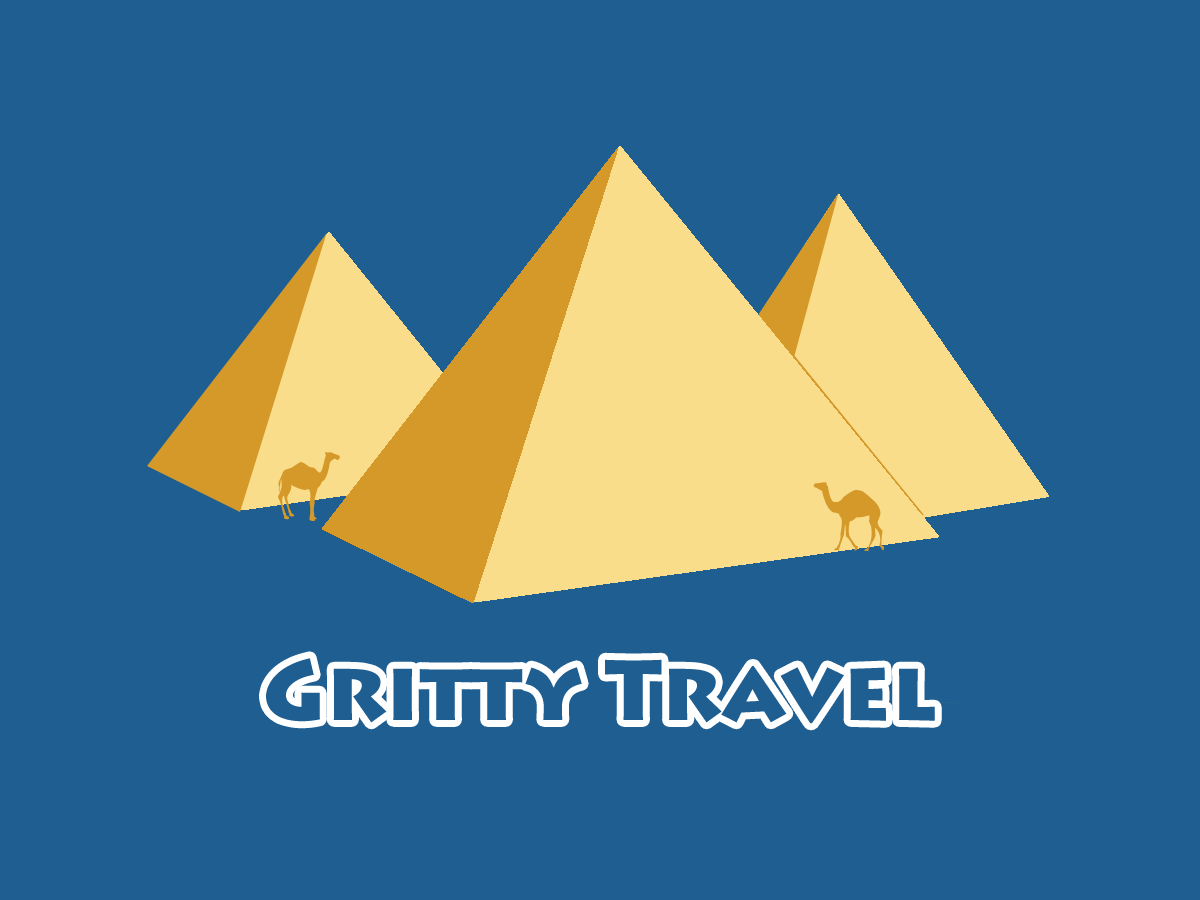
<style>
.page{position:relative;width:1200px;height:900px;background:#1f5e91}
.page>*{position:absolute;margin:0}
.t1{font:85px "LithosPro-Black";color:#1f5e91}
</style>
<div class="page">
<p class="t1" style="left:266px;top:658px;width:669px;height:66px">Gritty Travel</p>
</div>
